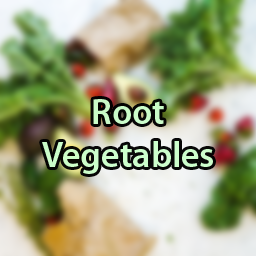
<style>
.page{position:relative;width:256px;height:256px}
.page>*{position:absolute;margin:0}
.t1{font:36px "MyriadPro-Semibold";color:#ccffcc}
</style>
<div class="page">
<p class="t1" style="left:42px;top:99px;width:171px;height:75px;text-align:center;opacity:0.97">Root<br>Vegetables</p>
</div>
